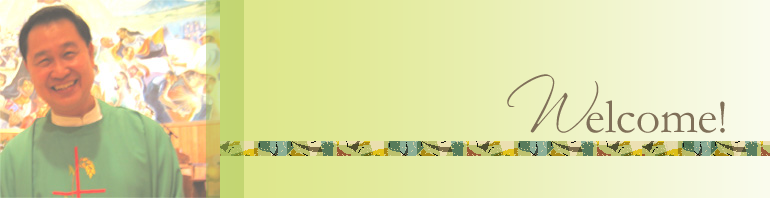
<style>
.page{position:relative;width:770px;height:198px}
.page>*{position:absolute;margin:0}
.t1{font:48px "Garamond";color:#807059}
.t2{font:72px "Scriptina";color:#807059}
</style>
<div class="page">
<p class="t1" style="left:507px;top:74px;width:218px;height:59px"><span class="t2">W</span>elcome!</p>
</div>
